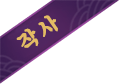
<style>
.page{position:relative;width:119px;height:84px;background:#ffffff}
.page>*{position:absolute;margin:0}
.t1{font:22px "SDKukdetopokki-aLt";letter-spacing:0.12em;color:#e3bb64;font-weight:bold}
</style>
<div class="page">
<p class="t1" style="left:16px;top:15px;width:42px;height:33px;rotate:-35deg">작사</p>
</div>
